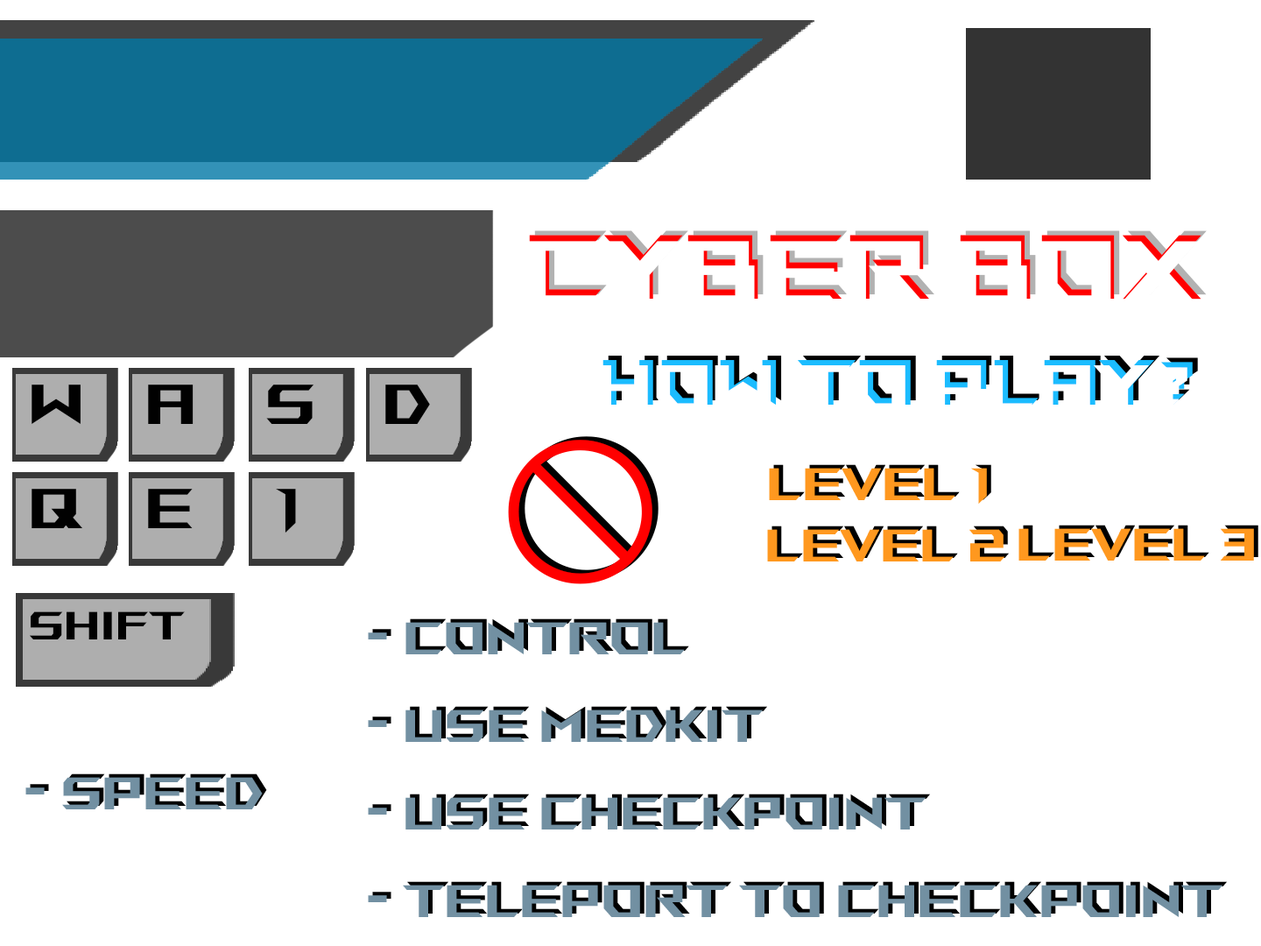
<style>
.page{position:relative;width:1261px;height:946px;background:#ffffff}
.page>*{position:absolute;margin:0}
.t1{font:145.9px "ROGFontsv1.6-Regular"}
.t2{font:145.9px "ROGFontsv1.6-Regular";color:#ffffff}
.t3{font:102.5px "ROGFontsv1.6-Regular";color:#ffffff}
.t4{font:102.5px "ROGFontsv1.6-Regular"}
.t5{font:90.3px "ROGFontsv1.6-Regular";color:#010101}
.t6{font:73.1px "ROGFontsv1.6-Regular";color:#ff981f}
.t7{font:73.1px "ROGFontsv1.6-Regular"}
.t8{font:63.2px "ROGFontsv1.6-Regular";color:#010101}
.t9{font:73.1px "ROGFontsv1.6-Regular";color:#7290a2}
</style>
<div class="page">
<p class="t1" style="left:534px;top:230px;width:673px;height:65px">CYBER BOX</p>
<p class="t2" style="left:525px;top:241px;width:673px;height:65px">CYBER BOX</p>
<p class="t1" style="left:529px;top:235px;width:672px;height:64px">CYBER BOX</p>
<p class="t3" style="left:597px;top:365px;width:590px;height:45px">How to play?</p>
<p class="t4" style="left:608px;top:356px;width:590px;height:44px">How to play?</p>
<p class="t5" style="left:32px;top:384px;width:49px;height:40px">W</p>
<p class="t5" style="left:148px;top:384px;width:46px;height:40px">A</p>
<p class="t5" style="left:266px;top:384px;width:48px;height:40px">S</p>
<p class="t5" style="left:385px;top:384px;width:45px;height:40px">D</p>
<p class="t6" style="left:769px;top:468px;width:218px;height:35px">Level 1</p>
<p class="t7" style="left:773px;top:464px;width:218px;height:36px">Level 1</p>
<p class="t5" style="left:32px;top:489px;width:51px;height:39px">Q</p>
<p class="t5" style="left:148px;top:489px;width:45px;height:39px">E</p>
<p class="t5" style="left:276px;top:489px;width:20px;height:44px">1</p>
<p class="t6" style="left:767px;top:529px;width:237px;height:32px">Level 2</p>
<p class="t7" style="left:771px;top:525px;width:238px;height:33px">Level 2</p>
<p class="t6" style="left:1018px;top:528px;width:236px;height:32px">Level 3</p>
<p class="t7" style="left:1023px;top:525px;width:235px;height:32px">Level 3</p>
<p class="t8" style="left:30px;top:611px;width:155px;height:28px">Shift</p>
<p class="t9" style="left:368px;top:622px;width:854px;height:295px">- Control<br>- Use MedKit<br>- use Checkpoint<br>- Teleport to Checkpoint</p>
<p class="t7" style="left:372px;top:618px;width:855px;height:295px">- Control<br>- use MedKit<br>- use Checkpoint<br>- Teleport to Checkpoint</p>
<p class="t7" style="left:30px;top:773px;width:237px;height:33px">- Speed</p>
<p class="t9" style="left:25px;top:777px;width:238px;height:32px">- Speed</p>
</div>
